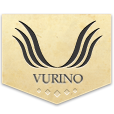
<style>
.page{position:relative;width:114px;height:114px;background:#ffffff}
.page>*{position:absolute;margin:0}
.t1{font:14.7px "Plinius";color:#3a3939;text-transform:uppercase}
</style>
<div class="page">
<p class="t1" style="left:33px;top:74px;width:50px;height:10px">vurino</p>
</div>
